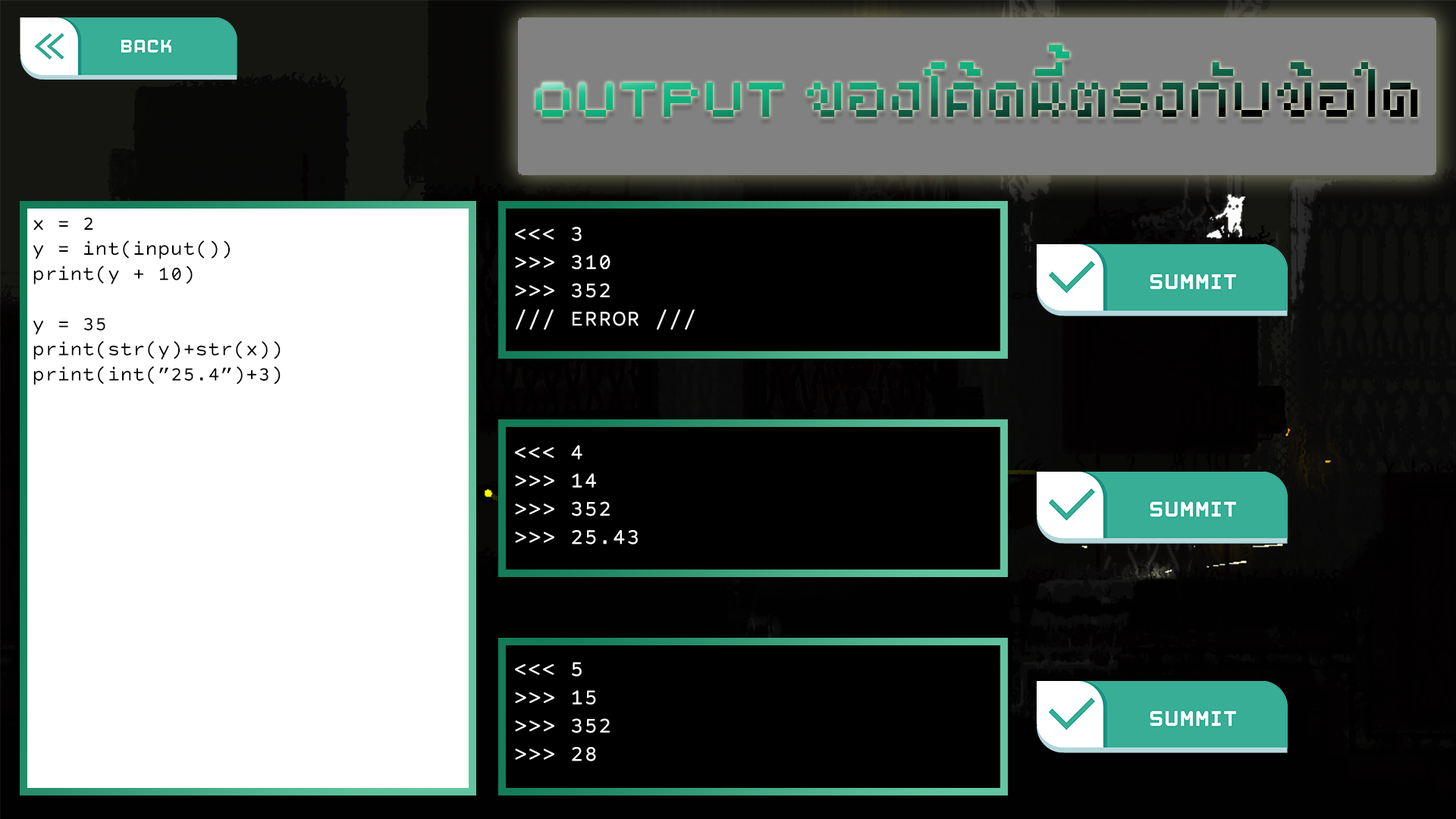
<style>
.page{position:relative;width:1456px;height:819px;background:#ffffff}
.page>*{position:absolute;margin:0}
.t1{font:97.5px "ZF#2ndPixelus"}
.t2{font:20.9px "CourierPrimeCode-Regular";color:#000000}
.t3{font:23.5px "CourierPrimeCode-Regular";color:#ffffff}
</style>
<div class="page">
<p class="t1" style="left:535px;top:45px;width:883px;height:72px">OUTPUT ของโค้ดนี้ตรงกับข้อใด</p>
<p class="t2" style="left:33px;top:217px;width:248px;height:168px">x = 2<br>y = int(input())<br>print(y + 10)<br><br>y = 35<br>print(str(y)+str(x))<br>print(int(”25.4”)+3)</p>
<p class="t3" style="left:515px;top:227px;width:180px;height:103px">&lt;&lt;&lt; 3<br>&gt;&gt;&gt; 310<br>&gt;&gt;&gt; 352<br>/// ERROR ///</p>
<p class="t3" style="left:515px;top:445px;width:123px;height:99px">&lt;&lt;&lt; 4<br>&gt;&gt;&gt; 14<br>&gt;&gt;&gt; 352<br>&gt;&gt;&gt; 25.43</p>
<p class="t3" style="left:515px;top:662px;width:95px;height:99px">&lt;&lt;&lt; 5<br>&gt;&gt;&gt; 15<br>&gt;&gt;&gt; 352<br>&gt;&gt;&gt; 28</p>
</div>
